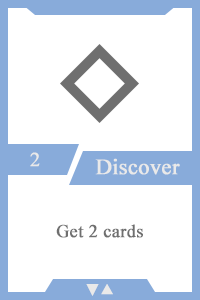
<style>
.page{position:relative;width:200px;height:300px;background:#ffffff}
.page>*{position:absolute;margin:0}
.t1{font:20px "TimesNewRomanPSMT";color:#e9e9e9;font-weight:bold}
.t2{font:22px "TimesNewRomanPSMT";color:#e9e9e9;font-weight:bold}
.t3{font:18px "TimesNewRomanPSMT";color:#6f6f6f;font-weight:bold}
.t4{font:14px "AdobeHeitiStd-Regular";color:#e9e9e9;font-weight:bold}
</style>
<div class="page">
<p class="t1" style="left:30px;top:152px;width:10px;height:15px">2</p>
<p class="t2" style="left:95px;top:158px;width:85px;height:17px">Discover</p>
<p class="t3" style="left:56px;top:224px;width:87px;height:14px">Get 2 cards</p>
<p class="t4" style="left:86px;top:284px;width:27px;height:12px">▼▲</p>
</div>
